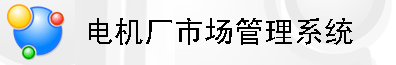
<style>
.page{position:relative;width:396px;height:65px}
.page>*{position:absolute;margin:0}
.t1{font:30px "SimHei";color:#000000}
</style>
<div class="page">
<p class="t1" style="left:89px;top:18px;width:264px;height:27px">电机厂市场管理系统</p>
</div>
